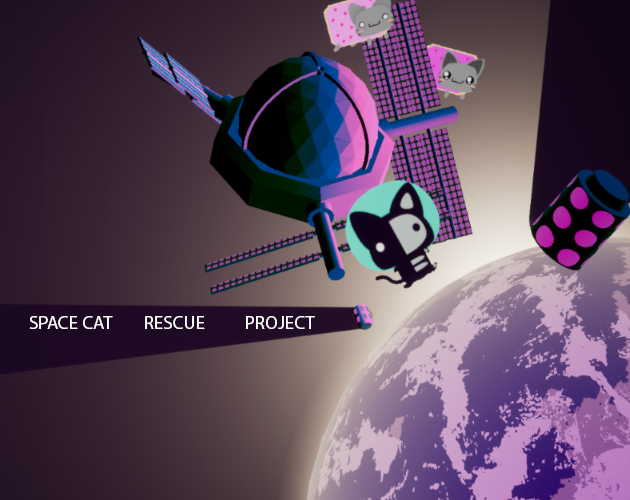
<style>
.page{position:relative;width:630px;height:500px}
.page>*{position:absolute;margin:0}
.t1{font:18px "MyriadPro-Regular";color:#ffffff;scale:1.04 1}
</style>
<div class="page">
<p class="t1" style="left:29px;top:316px;width:286px;height:13px">SPACE CAT        RESCUE          PROJECT</p>
</div>
